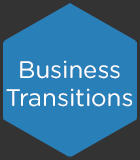
<style>
.page{position:relative;width:140px;height:160px;background:#2980b9}
.page>*{position:absolute;margin:0}
.t1{font:24px "GothamRounded-Book";color:#ffffff}
</style>
<div class="page">
<p class="t1" style="left:6px;top:60px;width:126px;height:47px;text-align:center">Business<br>Transitions</p>
</div>
